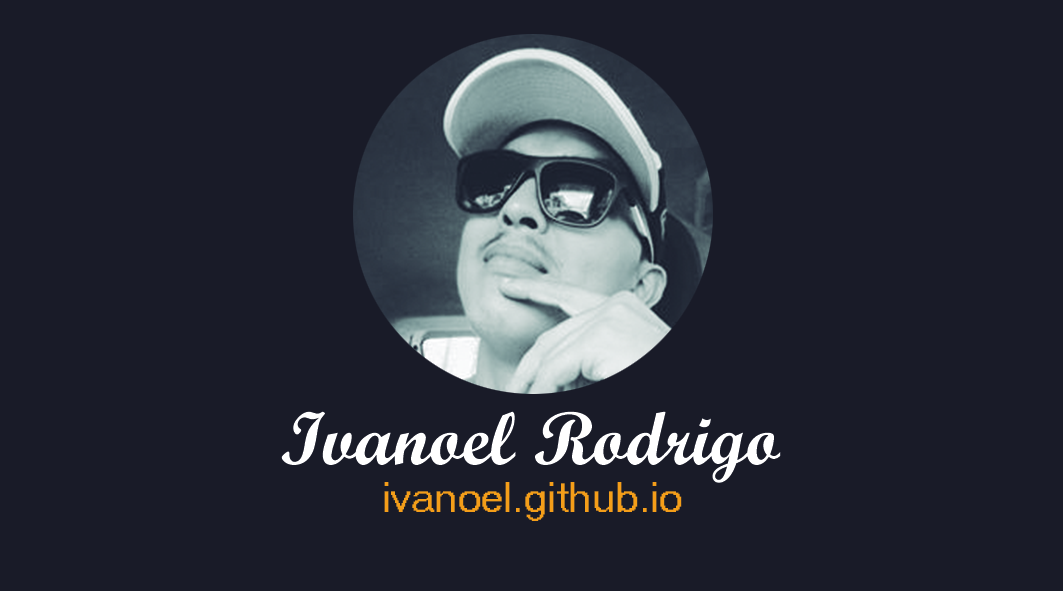
<style>
.page{position:relative;width:1063px;height:591px;background:#191b28}
.page>*{position:absolute;margin:0}
.t1{font:75px "ScriptMTBold";color:#ffffff}
.t2{font:41.7px "MS Sans Serif";color:#f49e19}
</style>
<div class="page">
<p class="t1" style="left:281px;top:411px;width:500px;height:72px">Ivanoel Rodrigo</p>
<p class="t2" style="left:384px;top:482px;width:298px;height:39px">ivanoel.github.io</p>
</div>
